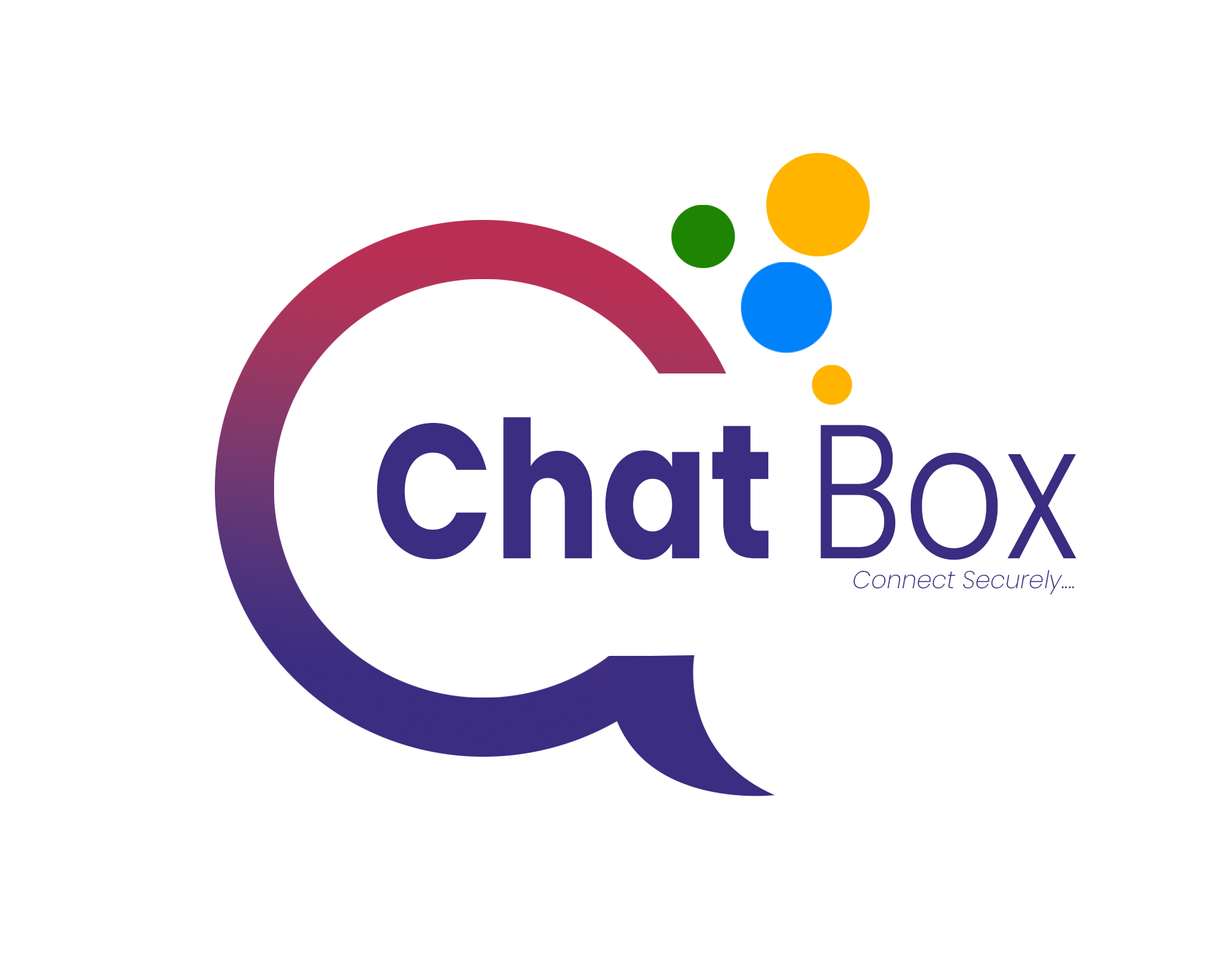
<style>
.page{position:relative;width:1222px;height:976px;background:#ffffff}
.page>*{position:absolute;margin:0}
.t1{font:190.7px "Poppins-Bold";color:#3a2d82;scale:0.84 1}
.t2{font:190.7px "Poppins-Light";color:#3a2d82;scale:0.84 1}
.t3{font:24.5px "Poppins-ExtraLightItalic";color:#3a2d82}
</style>
<div class="page">
<p class="t1" style="left:377px;top:417px;width:699px;height:143px">Chat <span class="t2">Box</span></p>
<p class="t3" style="left:853px;top:570px;width:221px;height:25px">Connect Securely....</p>
</div>
